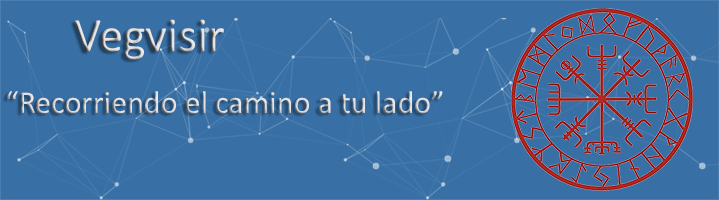
<style>
.page{position:relative;width:719px;height:200px;background:#3870a6}
.page>*{position:absolute;margin:0}
.t1{font:48px "Calibri";color:#dedcdc}
.t2{font:32px "Calibri";color:#dedcdc}
</style>
<div class="page">
<p class="t1" style="left:74px;top:19px;width:150px;height:41px">Vegvisir</p>
<p class="t2" style="left:7px;top:91px;width:436px;height:23px">“Recorriendo el camino a tu lado”</p>
</div>
